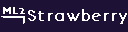
<style>
.page{position:relative;width:128px;height:32px;background:#1d1135}
.page>*{position:absolute;margin:0}
.t1{font:9px "BonvenoCF-Light";letter-spacing:0.005em;color:#ffffff;font-weight:bold}
.t2{font:11px "BonvenoCF-Light";letter-spacing:0.005em;color:#ffffff;font-weight:bold}
.t3{font:15px "BonvenoCF-Light";letter-spacing:0.005em;color:#ffffff;font-weight:bold}
</style>
<div class="page">
<p class="t1" style="left:3px;top:7px;width:15px;height:7px">ML</p>
<p class="t2" style="left:19px;top:8px;width:6px;height:6px">2</p>
<p class="t3" style="left:28px;top:9px;width:99px;height:15px">Strawberry</p>
</div>
